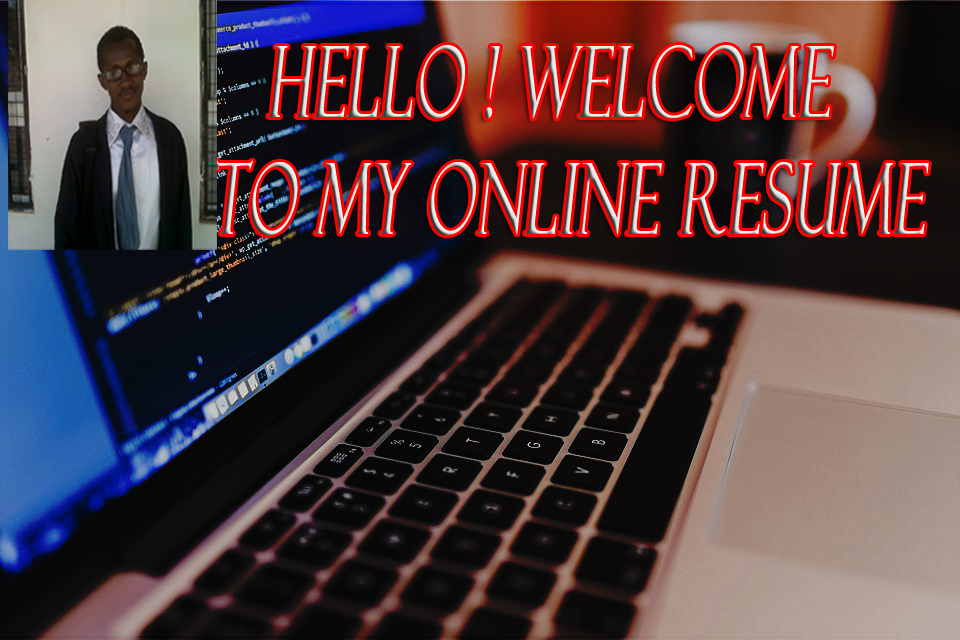
<style>
.page{position:relative;width:960px;height:640px}
.page>*{position:absolute;margin:0}
.t1{font:97.4px "FelixTitlingMT";letter-spacing:0.005em;font-weight:bold;font-style:italic;scale:0.61 1}
</style>
<div class="page">
<p class="t1" style="left:216px;top:45px;width:713px;height:191px">hello ! welcome <br>to my online resume</p>
</div>
